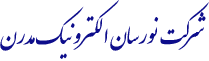
<style>
.page{position:relative;width:209px;height:61px;background:#ffffff}
.page>*{position:absolute;margin:0}
.t1{font:39px "IranNastaliq";color:#0d0d8b}
</style>
<div class="page">
<p class="t1" style="left:0px;top:0px;width:209px;height:59px">شرکت نورسان الکترونیک مدرن</p>
</div>
